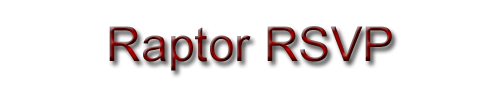
<style>
.page{position:relative;width:500px;height:100px;background:#ffffff}
.page>*{position:absolute;margin:0}
.t1{font:48px "ArialMT"}
</style>
<div class="page">
<p class="t1" style="left:109px;top:26px;width:283px;height:45px">Raptor RSVP</p>
</div>
